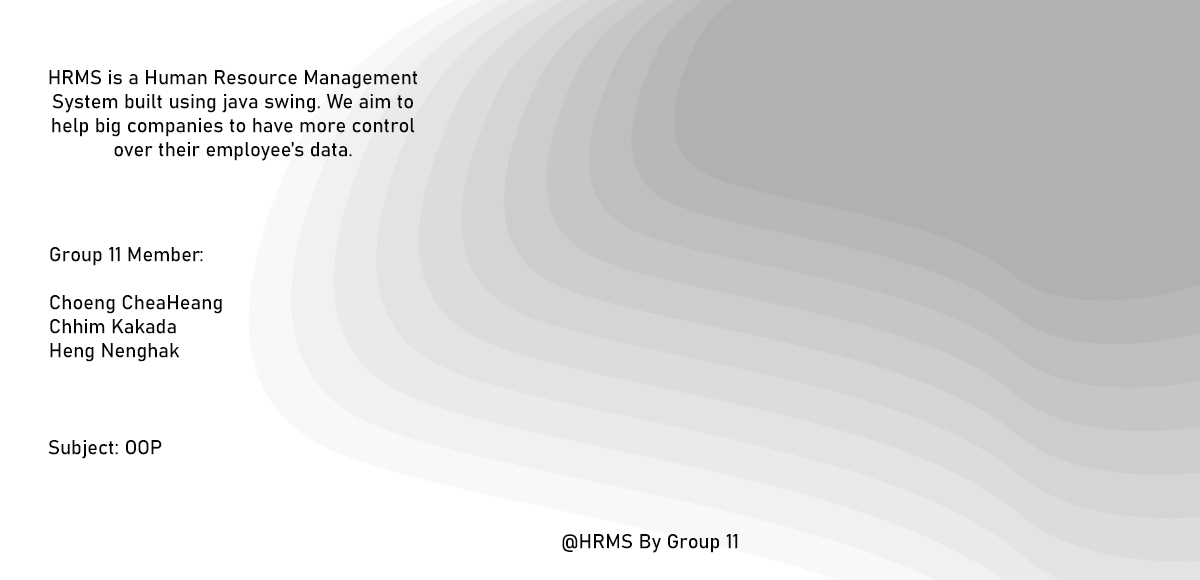
<style>
.page{position:relative;width:1200px;height:580px;background:#ffffff}
.page>*{position:absolute;margin:0}
.t1{font:20px "Bahnschrift";color:#060606}
</style>
<div class="page">
<p class="t1" style="left:49px;top:70px;width:368px;height:91px;text-align:center">HRMS is a Human Resource Management System built using java swing. We aim to help big companies to have more control over their employee’s data.</p>
<p class="t1" style="left:50px;top:247px;width:172px;height:115px">Group 11 Member:<br><br>Choeng CheaHeang<br>Chhim Kakada<br>Heng Nenghak</p>
<p class="t1" style="left:48px;top:440px;width:114px;height:19px">Subject: OOP</p>
<p class="t1" style="left:562px;top:534px;width:176px;height:19px">@HRMS By Group 11</p>
</div>
